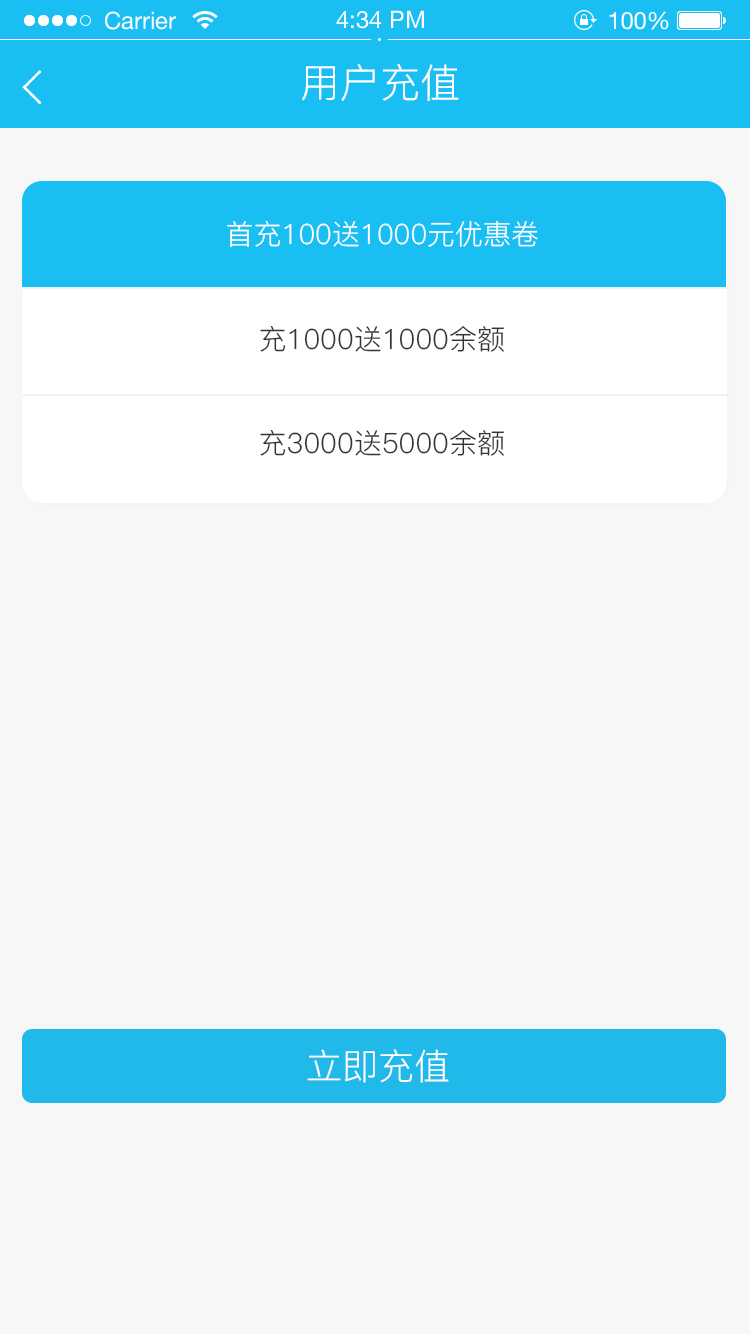
<style>
.page{position:relative;width:750px;height:1334px;background:#f7f7f7}
.page>*{position:absolute;margin:0}
.t1{font:40px "PingFang-SC-Regular";color:#ffffff}
.t2{font:28px "PingFang-SC-Regular";color:#ffffff}
.t3{font:28px "PingFang-SC-Regular";color:#353535}
.t4{font:36px "PingFang-SC-Regular";color:#ffffff}
</style>
<div class="page">
<p class="t1" style="left:302px;top:64px;width:157px;height:37px">用户充值</p>
<p class="t2" style="left:227px;top:221px;width:311px;height:26px">首充100送1000元优惠卷</p>
<p class="t3" style="left:260px;top:326px;width:244px;height:26px">充1000送1000余额</p>
<p class="t3" style="left:260px;top:430px;width:244px;height:26px">充3000送5000余额</p>
<p class="t4" style="left:307px;top:1049px;width:142px;height:34px">立即充值</p>
</div>
